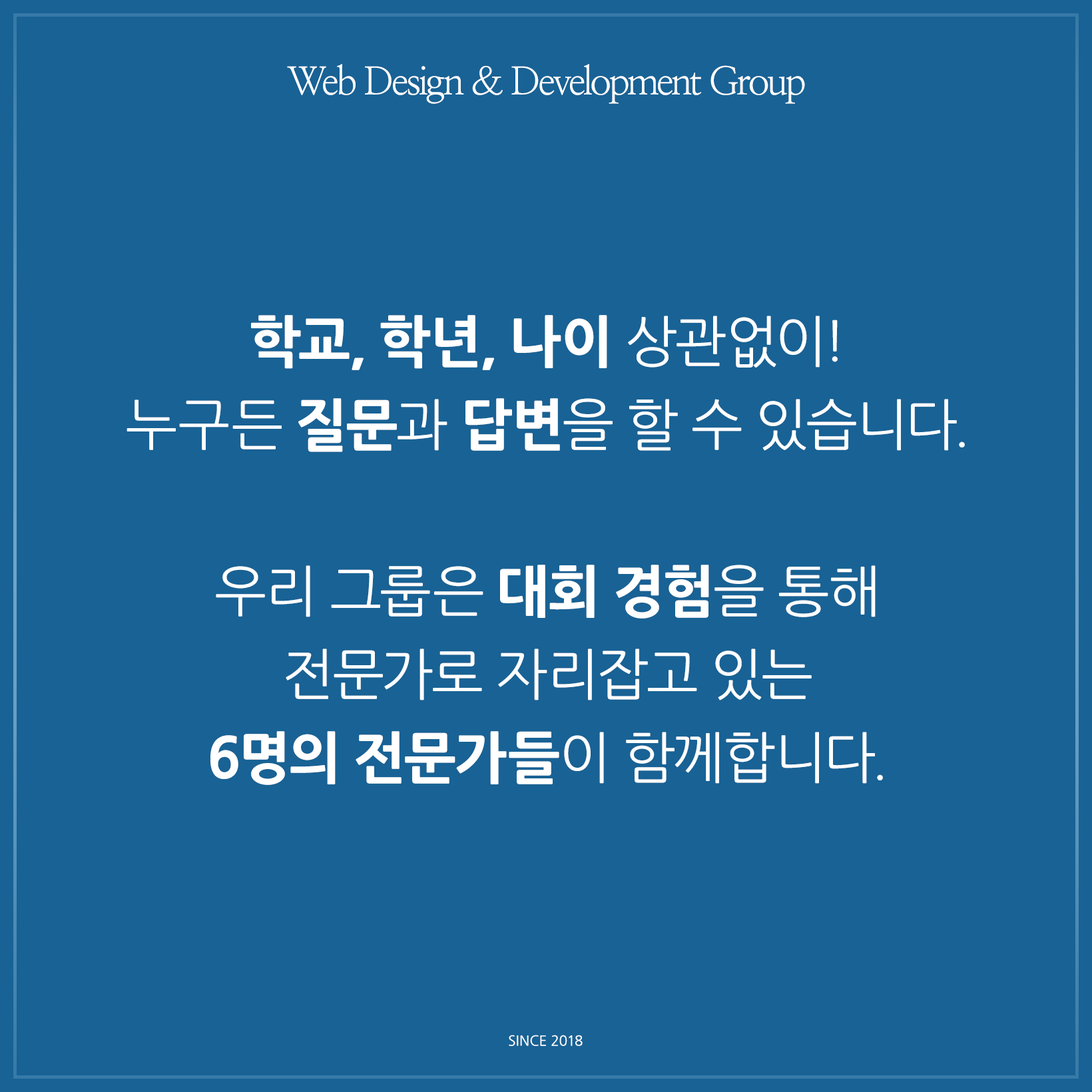
<style>
.page{position:relative;width:1092px;height:1092px;background:#186295}
.page>*{position:absolute;margin:0}
.t1{font:38.3px "NanumMyeongjo";letter-spacing:-0.065em;color:#ffffff}
.t2{font:55.5px/83.2px "NanumGothic";letter-spacing:-0.03em;color:#ffffff}
.t3{font:55.5px/83.2px "NanumGothicExtraBold";letter-spacing:-0.03em;color:#ffffff}
.t4{font:13.9px "NanumGothic";color:#ffffff;text-transform:uppercase}
</style>
<div class="page">
<p class="t1" style="left:287px;top:64px;width:518px;height:40px">Web Design &amp; Development Group</p>
<p class="t2" style="left:127px;top:315px;width:838px;height:470px;text-align:center"><span class="t3">학교, 학년, 나이 </span>상관없이!<br>누구든 <span class="t3">질문</span>과 <span class="t3">답변</span>을 할 수 있습니다.<br><br>우리 그룹은 <span class="t3">대회 경험</span>을 통해<br>전문가로 자리잡고 있는<br><span class="t3">6명의 전문가들</span>이 함께합니다.</p>
<p class="t4" style="left:509px;top:1035px;width:74px;height:11px">Since 2018</p>
</div>
